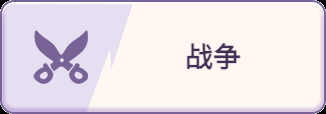
<style>
.page{position:relative;width:326px;height:114px;background:#fff8f2}
.page>*{position:absolute;margin:0}
.t1{font:28px/28px "WebPSD-18463539-0-Regular";color:#3f3254;font-weight:bold}
</style>
<div class="page">
<p class="t1" style="left:118px;top:28px;width:190px;height:58px;text-align:center">战争</p>
</div>
